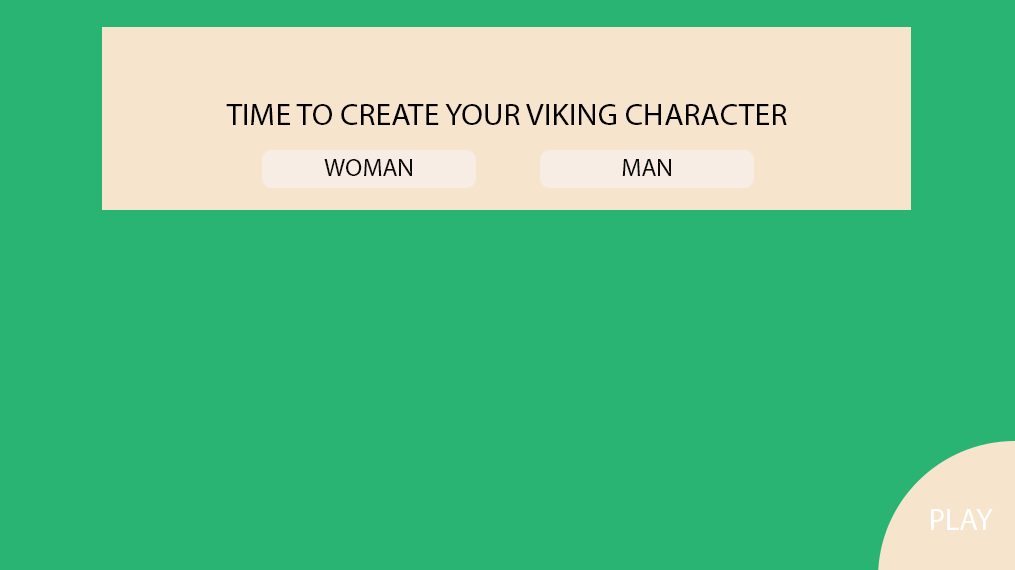
<style>
.page{position:relative;width:1015px;height:570px;background:#29b473}
.page>*{position:absolute;margin:0}
.t1{font:30.4px "MyriadPro-Regular";color:#000000;scale:1.05 1}
.t2{font:25px "MyriadPro-Regular";color:#0b0a09}
.t3{font:30.6px "MyriadPro-Regular";color:#ffffff}
</style>
<div class="page">
<p class="t1" style="left:226px;top:104px;width:561px;height:21px">TIME TO CREATE YOUR VIKING CHARACTER</p>
<p class="t2" style="left:324px;top:159px;width:88px;height:17px">WOMAN</p>
<p class="t2" style="left:622px;top:159px;width:49px;height:17px">MAN</p>
<p class="t3" style="left:931px;top:509px;width:62px;height:21px">PLAY</p>
</div>
